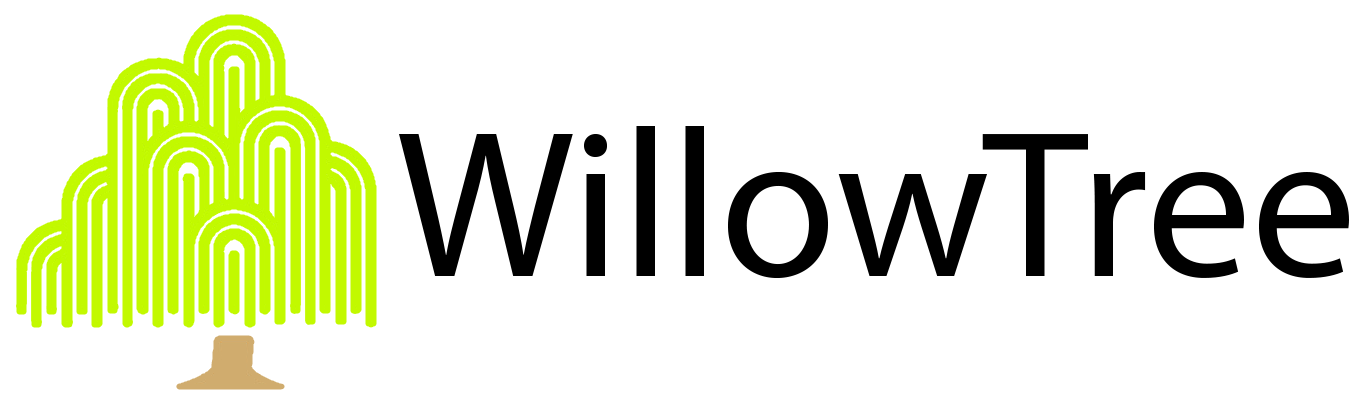
<style>
.page{position:relative;width:1371px;height:411px;background:#ffffff}
.page>*{position:absolute;margin:0}
.t1{font:211px "MyriadPro-Regular";color:#000000}
</style>
<div class="page">
<p class="t1" style="left:399px;top:126px;width:950px;height:152px">WillowTree</p>
</div>
